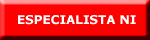
<style>
.page{position:relative;width:150px;height:40px;background:#ff0000}
.page>*{position:absolute;margin:0}
.t1{font:12px "Verdana-Bold";color:#ffffff}
</style>
<div class="page">
<p class="t1" style="left:18px;top:15px;width:118px;height:10px">ESPECIALISTA NI</p>
</div>
